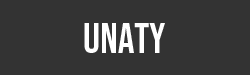
<style>
.page{position:relative;width:250px;height:75px;background:#333333}
.page>*{position:absolute;margin:0}
.t1{font:41.7px "BebasNeue-Regular";color:#ffffff}
</style>
<div class="page">
<p class="t1" style="left:84px;top:23px;width:81px;height:30px">Unaty</p>
</div>
